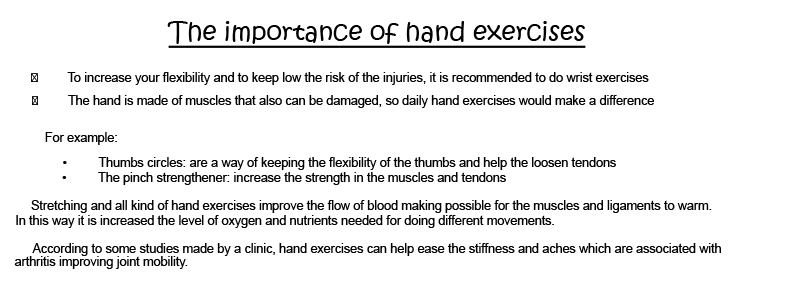
<style>
.page{position:relative;width:800px;height:291px;background:#ffffff}
.page>*{position:absolute;margin:0}
.t1{font:25px "KristenITC-Regular";color:#010000;text-decoration:underline}
.t2{font:12.5px "ArialMT";color:#000000}
</style>
<div class="page">
<p class="t1" style="left:167px;top:21px;width:419px;height:27px">The importance of hand exercises</p>
<p class="t2" style="left:45px;top:132px;width:72px;height:13px">For example:</p>
<p class="t2" style="left:63px;top:157px;width:553px;height:13px">• Thumbs circles: are a way of keeping the flexibility of the thumbs and help the loosen tendons</p>
<p class="t2" style="left:62px;top:172px;width:444px;height:13px">• The pinch strengthener: increase the strength in the muscles and tendons</p>
<p class="t2" style="left:31px;top:200px;width:681px;height:13px">Stretching and all kind of hand exercises improve the flow of blood making possible for the muscles and ligaments to warm.</p>
<p class="t2" style="left:16px;top:215px;width:538px;height:13px">In this way it is increased the level of oxygen and nutrients needed for doing different movements.</p>
<p class="t2" style="left:32px;top:243px;width:689px;height:13px">According to some studies made by a clinic, hand exercises can help ease the stiffness and aches which are associated with</p>
<p class="t2" style="left:14px;top:256px;width:174px;height:13px">arthritis improving joint mobility.</p>
</div>
